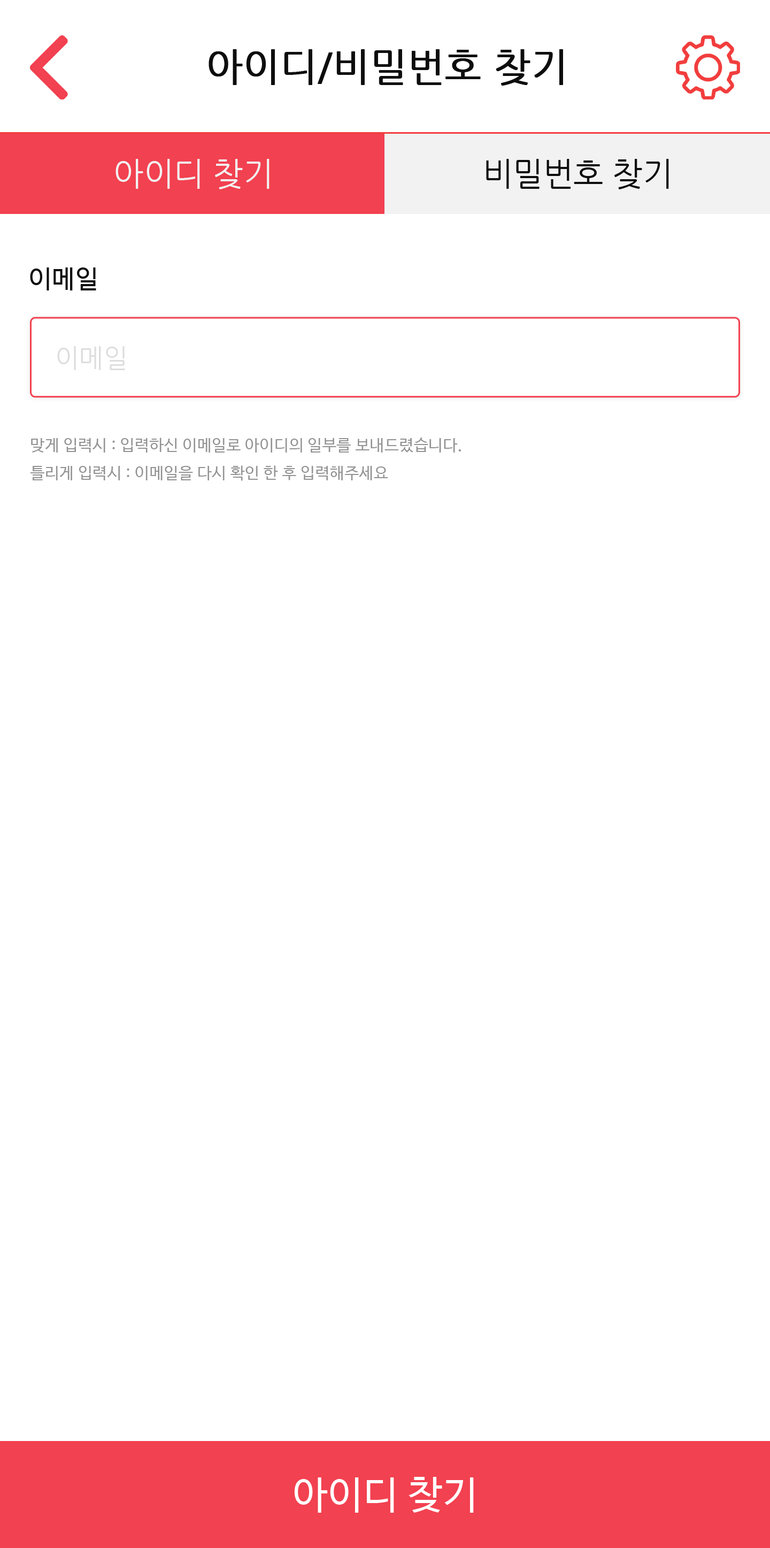
<style>
.page{position:relative;width:770px;height:1548px;background:#ffffff}
.page>*{position:absolute;margin:0}
.t1{font:38.5px "NanumGothic";color:#0d0d0d;font-weight:bold}
.t2{font:32.1px "NanumGothic";color:#f2f2f2}
.t3{font:32.1px "NanumGothic";color:#0d0d0d}
.t4{font:25.7px "NanumBarunGothic";letter-spacing:0.02em;color:#0d0d0d}
.t5{font:25.7px "NanumGothic";color:#dddddd}
.t6{font:16px "NanumBarunGothic";letter-spacing:0.02em;color:#939393}
.t7{font:38.5px "NanumBarunGothic";letter-spacing:0.02em;color:#ffffff}
</style>
<div class="page">
<p class="t1" style="left:209px;top:49px;width:354px;height:37px">아이디/비밀번호 찾기</p>
<p class="t2" style="left:116px;top:159px;width:154px;height:30px">아이디 찾기</p>
<p class="t3" style="left:486px;top:159px;width:183px;height:30px">비밀번호 찾기</p>
<p class="t4" style="left:30px;top:267px;width:66px;height:23px">이메일</p>
<p class="t5" style="left:57px;top:346px;width:68px;height:24px">이메일</p>
<p class="t6" style="left:30px;top:438px;width:431px;height:43px">맞게 입력시 : 입력하신 이메일로 아이디의 일부를 보내드렸습니다.<br>틀리게 입력시 : 이메일을 다시 확인 한 후 입력해주세요</p>
<p class="t7" style="left:294px;top:1477px;width:180px;height:36px">아이디 찾기</p>
</div>
